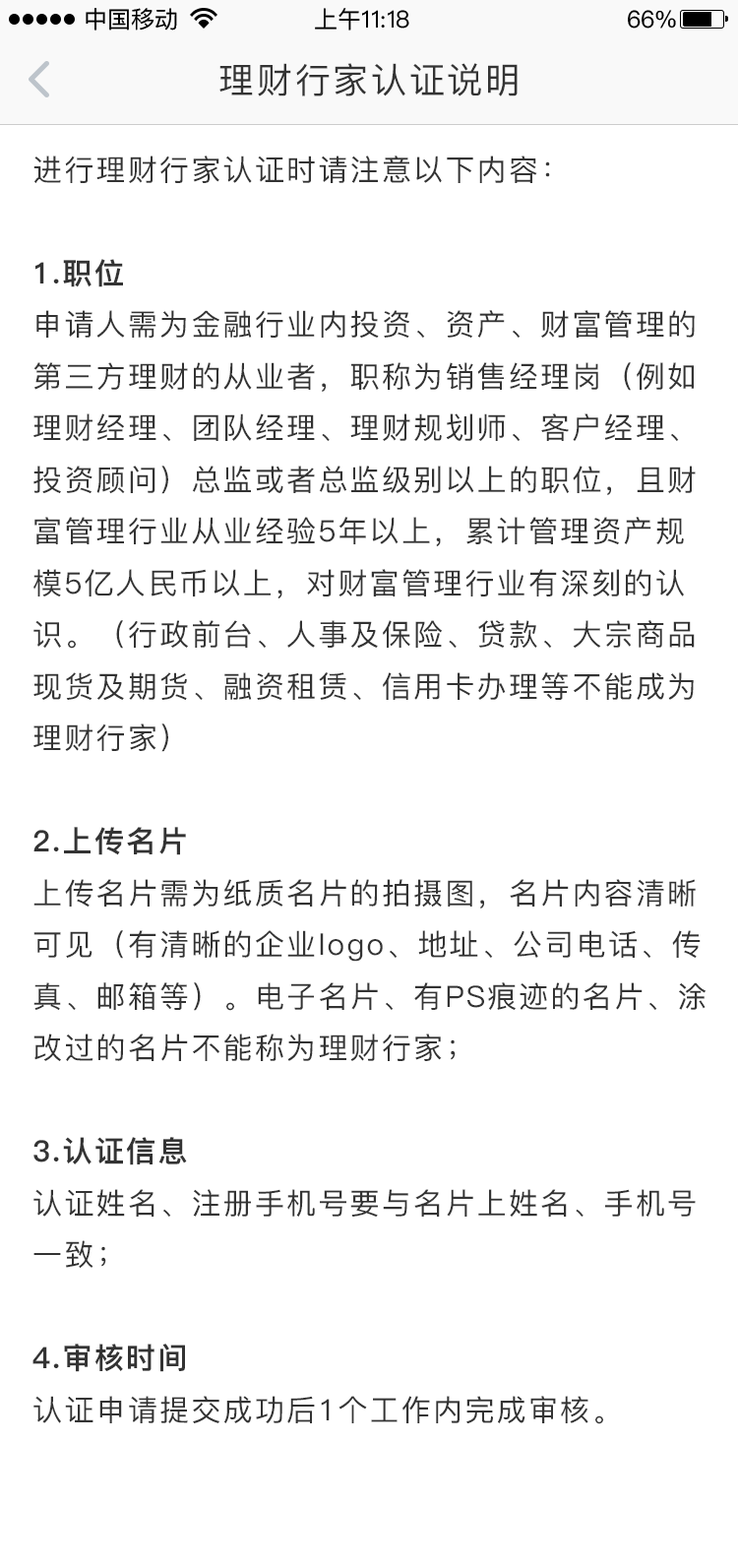
<style>
.page{position:relative;width:738px;height:1568px;background:#ffffff}
.page>*{position:absolute;margin:0}
.t1{font:23.6px "PingFangSC-Regular";color:#000000}
.t2{font:35.4px "PingFang-SC-Medium";letter-spacing:0.075em;color:#333333}
.t3{font:29.5px "PingFang-SC-Medium";letter-spacing:0.075em;color:#333333}
.t4{font:29.5px "PingFang-SC-Heavy";letter-spacing:0.075em;color:#333333}
</style>
<div class="page">
<p class="t1" style="left:86px;top:8px;width:91px;height:23px">中国移动</p>
<p class="t1" style="left:315px;top:8px;width:94px;height:23px">上午11:18</p>
<p class="t1" style="left:628px;top:10px;width:48px;height:19px">66%</p>
<p class="t2" style="left:220px;top:63px;width:298px;height:33px">理财行家认证说明</p>
<p class="t3" style="left:32px;top:156px;width:675px;height:1268px">进行理财行家认证时请注意以下内容：<br><br><span class="t4">1.职位<br></span>申请人需为金融行业内投资、资产、财富管理的第三方理财的从业者，职称为销售经理岗（例如理财经理、团队经理、理财规划师、客户经理、投资顾问）总监或者总监级别以上的职位，且财富管理行业从业经验5年以上，累计管理资产规模5亿人民币以上，对财富管理行业有深刻的认识。（行政前台、人事及保险、贷款、大宗商品现货及期货、融资租赁、信用卡办理等不能成为理财行家）<br><br><span class="t4">2.上传名片<br></span>上传名片需为纸质名片的拍摄图，名片内容清晰可见（有清晰的企业logo、地址、公司电话、传真、邮箱等）。电子名片、有PS痕迹的名片、涂改过的名片不能称为理财行家；<br><br><span class="t4">3.认证信息<br></span>认证姓名、注册手机号要与名片上姓名、手机号一致；<br><br><span class="t4">4.审核时间<br></span>认证申请提交成功后1个工作内完成审核。</p>
</div>
